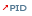
<style>
.page{position:relative;width:32px;height:16px;background:#ffffff}
.page>*{position:absolute;margin:0}
.t1{font:8px "Verdana";color:#547993;scale:1.2 1}
</style>
<div class="page">
<p class="t1" style="left:9px;top:4px;width:18px;height:9px">PID</p>
</div>
